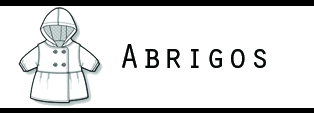
<style>
.page{position:relative;width:314px;height:113px;background:#ffffff}
.page>*{position:absolute;margin:0}
.t1{font:36px "OratorStd";color:#060808}
</style>
<div class="page">
<p class="t1" style="left:122px;top:44px;width:144px;height:24px">Abrigos</p>
</div>
